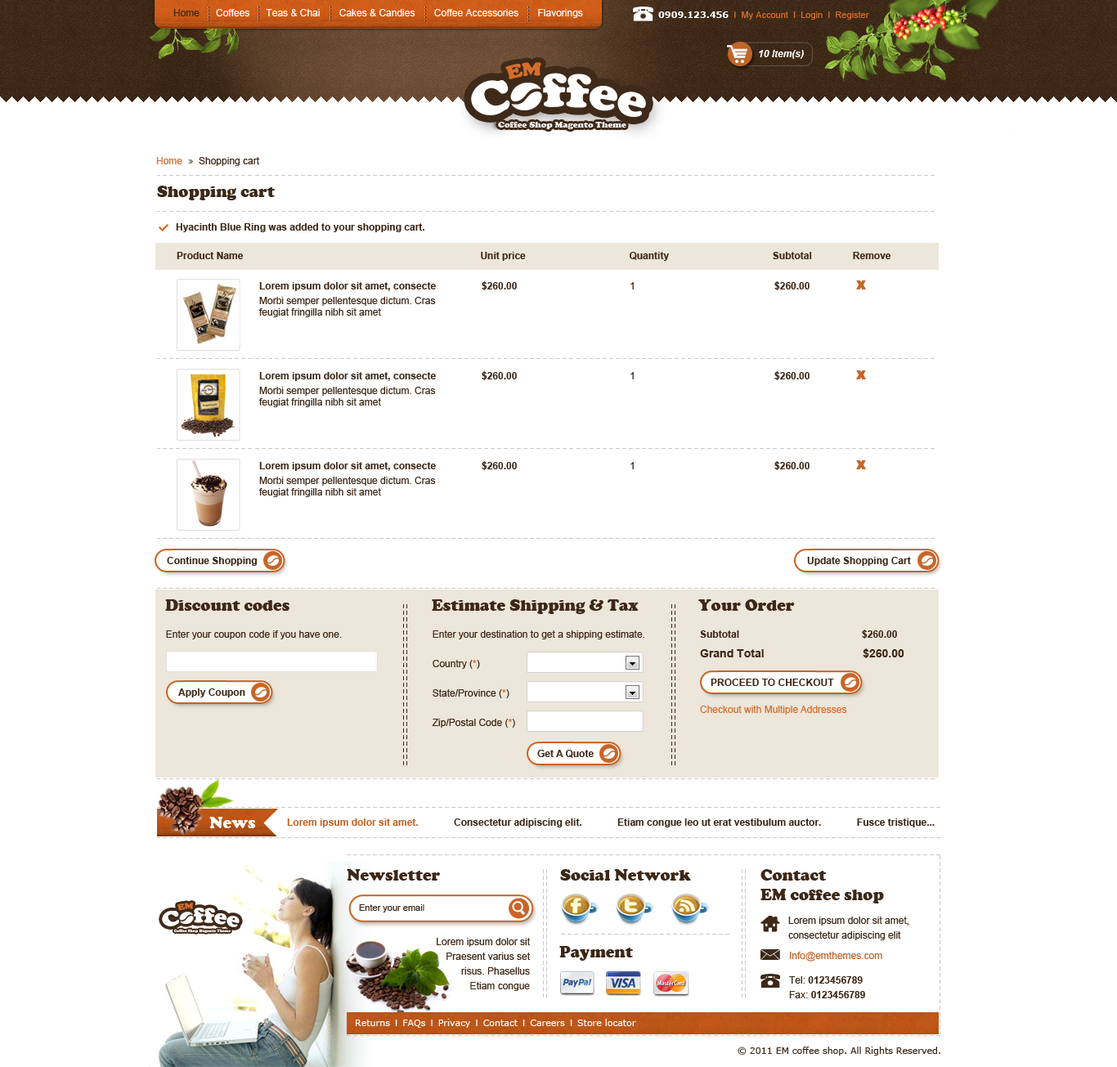
<style>
.page{position:relative;width:1117px;height:1067px;background:#ffffff}
.page>*{position:absolute;margin:0}
.t1{font:9.8px "ArialMT";color:#fefefe}
.t2{font:9.8px "ArialMT";color:#3d2817}
.t3{font:9px "ArialMT";color:#d56d2b}
.t4{font:9px "Verdana-Bold";color:#ffffff}
.t5{font:9.8px "Arial-BoldItalicMT";color:#ffffff}
.t6{font:9.8px "ArialMT";color:#d56d2b}
.t7{font:16.4px "CooperBlack";color:#3d2817}
.t8{font:9.8px "Arial-BoldMT";color:#3d2817}
.t9{font:9.8px/14.7px "ArialMT";color:#3d2817}
.t10{font:9.8px/11.5px "Arial-BoldMT";color:#3d2817}
.t11{font:9.8px/11.5px "ArialMT";color:#3d2817}
.t12{font:9.8px/19.6px "Arial-BoldMT";color:#3d2817}
.t13{font:11.5px/19.6px "Arial-BoldMT";color:#3d2817}
.t14{font:9.8px/19.6px "ArialMT";color:#3d2817}
.t15{font:9.8px/29.4px "ArialMT";color:#3d2817}
.t16{font:9.8px/29.4px "ArialMT";color:#d56d2b}
.t17{font:16.4px "CooperBlack";color:#ffffff}
.t18{font:9.8px "Arial-BoldMT";color:#c26529}
.t19{font:16.4px/19.6px "CooperBlack";color:#3d2817}
.t20{font:9px "ArialMT";color:#3d2817}
.t21{font:9.8px/24.5px "ArialMT";color:#c26529}
.t22{font:9.8px/24.5px "ArialMT";color:#3d2817}
.t23{font:9.8px/24.5px "Arial-BoldMT";color:#3d2817}
.t24{font:9.8px/14.7px "Arial-BoldMT";color:#3d2817}
.t25{font:9px "Verdana";color:#ffffff}
.t26{font:9px "ArialMT";color:#ffffff}
.t27{font:9px "Verdana";color:#3d2817}
</style>
<div class="page">
<p class="t1" style="left:173px;top:9px;width:410px;height:9px"><span class="t2">Home</span>      Coffees      Teas &amp; Chai       Cakes &amp; Candies       Coffee Accessories       Flavorings</p>
<p class="t3" style="left:658px;top:11px;width:211px;height:9px"><span class="t4">0909.123.456</span>  I  My Account  I  Login  I  Register</p>
<p class="t5" style="left:759px;top:50px;width:45px;height:9px">10 Item(s)</p>
<p class="t2" style="left:156px;top:157px;width:103px;height:9px"><span class="t6">Home</span>      Shopping cart</p>
<p class="t7" style="left:157px;top:186px;width:118px;height:14px">Shopping cart</p>
<p class="t8" style="left:176px;top:223px;width:248px;height:9px">Hyacinth Blue Ring was added to your shopping cart.</p>
<p class="t8" style="left:177px;top:252px;width:714px;height:9px">Product Name                                                                                       Unit price                                      Quantity                                      Subtotal               Remove</p>
<p class="t8" style="left:482px;top:281px;width:328px;height:9px">$260.00<span class="t2">                         1                                                   </span>$260.00</p>
<p class="t9" style="left:259px;top:282px;width:177px;height:35px"><span class="t10">Lorem ipsum dolor sit amet, consecte<br></span>Morbi semper pellentesque dictum. Cras <br><span class="t11">feugiat fringilla nibh sit amet</span></p>
<p class="t9" style="left:259px;top:372px;width:177px;height:35px"><span class="t10">Lorem ipsum dolor sit amet, consecte<br></span>Morbi semper pellentesque dictum. Cras <br><span class="t11">feugiat fringilla nibh sit amet</span></p>
<p class="t8" style="left:482px;top:371px;width:328px;height:9px">$260.00<span class="t2">                         1                                                   </span>$260.00</p>
<p class="t8" style="left:482px;top:461px;width:328px;height:9px">$260.00<span class="t2">                         1                                                   </span>$260.00</p>
<p class="t9" style="left:259px;top:462px;width:177px;height:35px"><span class="t10">Lorem ipsum dolor sit amet, consecte<br></span>Morbi semper pellentesque dictum. Cras <br><span class="t11">feugiat fringilla nibh sit amet</span></p>
<p class="t8" style="left:167px;top:557px;width:90px;height:9px">Continue Shopping</p>
<p class="t8" style="left:807px;top:557px;width:104px;height:9px">Update Shopping Cart</p>
<p class="t7" style="left:165px;top:600px;width:125px;height:11px">Discount codes</p>
<p class="t7" style="left:432px;top:600px;width:207px;height:14px">Estimate Shipping &amp; Tax</p>
<p class="t7" style="left:698px;top:600px;width:97px;height:11px">Your Order</p>
<p class="t12" style="left:700px;top:630px;width:205px;height:28px">Subtotal                                             $260.00<br><span class="t13">Grand Total                               $260.00</span></p>
<p class="t2" style="left:166px;top:631px;width:176px;height:9px">Enter your coupon code if you have one.</p>
<p class="t14" style="left:432px;top:631px;width:212px;height:97px">Enter your destination to get a shipping estimate.<br><span class="t15">Country (</span><span class="t16">*</span><span class="t15">)<br>State/Province (</span><span class="t16">*</span><span class="t15">)<br>Zip/Postal Code (</span><span class="t16">*</span><span class="t15">)</span></p>
<p class="t8" style="left:178px;top:689px;width:67px;height:9px">Apply Coupon</p>
<p class="t8" style="left:711px;top:679px;width:123px;height:7px">PROCEED TO CHECKOUT</p>
<p class="t6" style="left:700px;top:706px;width:147px;height:9px">Checkout with Multiple Addresses</p>
<p class="t8" style="left:537px;top:750px;width:57px;height:8px">Get A Quote</p>
<p class="t17" style="left:209px;top:817px;width:46px;height:12px">News</p>
<p class="t8" style="left:287px;top:819px;width:648px;height:9px"><span class="t18">Lorem ipsum dolor sit amet.</span>             Consectetur adipiscing elit.             Etiam congue leo ut erat vestibulum auctor.             Fusce tristique...</p>
<p class="t7" style="left:347px;top:869px;width:93px;height:12px">Newsletter</p>
<p class="t7" style="left:560px;top:869px;width:131px;height:12px">Social Network</p>
<p class="t19" style="left:761px;top:869px;width:123px;height:35px">Contact<br>EM coffee shop</p>
<p class="t20" style="left:359px;top:905px;width:65px;height:8px">Enter your email</p>
<p class="t9" style="left:788px;top:917px;width:121px;height:24px">Lorem ipsum dolor sit amet, <br>consectetur adipiscing elit</p>
<p class="t9" style="left:437px;top:938px;width:93px;height:53px;text-align:right">Lorem ipsum dolor sit<br>Praesent varius set<br>risus. Phasellus<br>Etiam congue</p>
<p class="t7" style="left:559px;top:946px;width:74px;height:15px">Payment</p>
<p class="t21" style="left:789px;top:952px;width:93px;height:47px">Info@emthemes.com<br><span class="t22">Tel: </span><span class="t23">0123456789<br></span><span class="t9">Fax: </span><span class="t24">0123456789</span></p>
<p class="t25" style="left:356px;top:1019px;width:280px;height:9px">Returns<span class="t26">  I  </span>FAQs<span class="t26">  I  </span>Privacy<span class="t26">  I  </span>Contact<span class="t26">  I  </span>Careers<span class="t26">  I  </span>Store locator</p>
<p class="t27" style="left:738px;top:1047px;width:203px;height:9px">© 2011 EM coffee shop. All Rights Reserved.</p>
</div>
